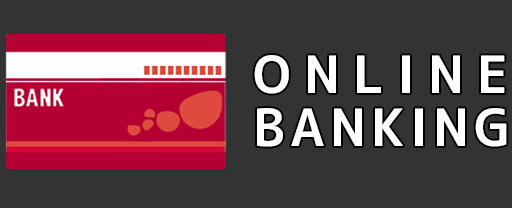
<style>
.page{position:relative;width:512px;height:208px;background:#333333}
.page>*{position:absolute;margin:0}
.t1{font:51.2px/52.8px "mplus-1c-bold";letter-spacing:0.1em;color:#ffffff}
.t2{font:51.2px/52.8px "mplus-1c-bold";letter-spacing:0.258em;color:#ffffff}
</style>
<div class="page">
<p class="t1" style="left:254px;top:55px;width:253px;height:92px"><span class="t2">ONLINE<br></span>BANKING</p>
</div>
